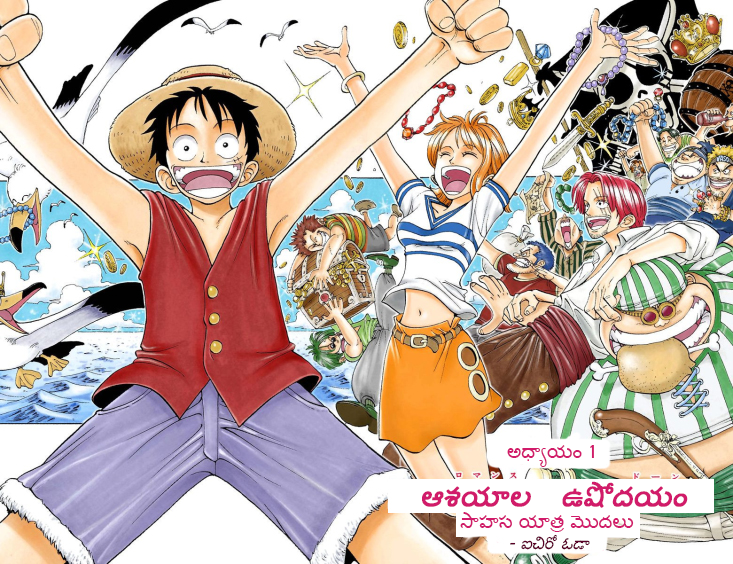
<style>
.page{position:relative;width:733px;height:564px}
.page>*{position:absolute;margin:0}
.t1{font:20px "Gautami";color:#d11b6a}
.t2{font:30px "Gautami";color:#d11b6a;font-weight:bold;font-style:italic}
.t3{font:16.8px "Gautami";color:#580026;font-style:italic}
</style>
<div class="page">
<p class="t1" style="left:507px;top:445px;width:87px;height:22px">అధ్యాయం 1</p>
<p class="t2" style="left:422px;top:481px;width:266px;height:27px">ఆశయాల   ఉషోదయం</p>
<p class="t1" style="left:460px;top:512px;width:174px;height:20px">సాహస యాత్ర మొదలు</p>
<p class="t3" style="left:510px;top:534px;width:80px;height:16px">- ఐచిరో ఓడా</p>
</div>
